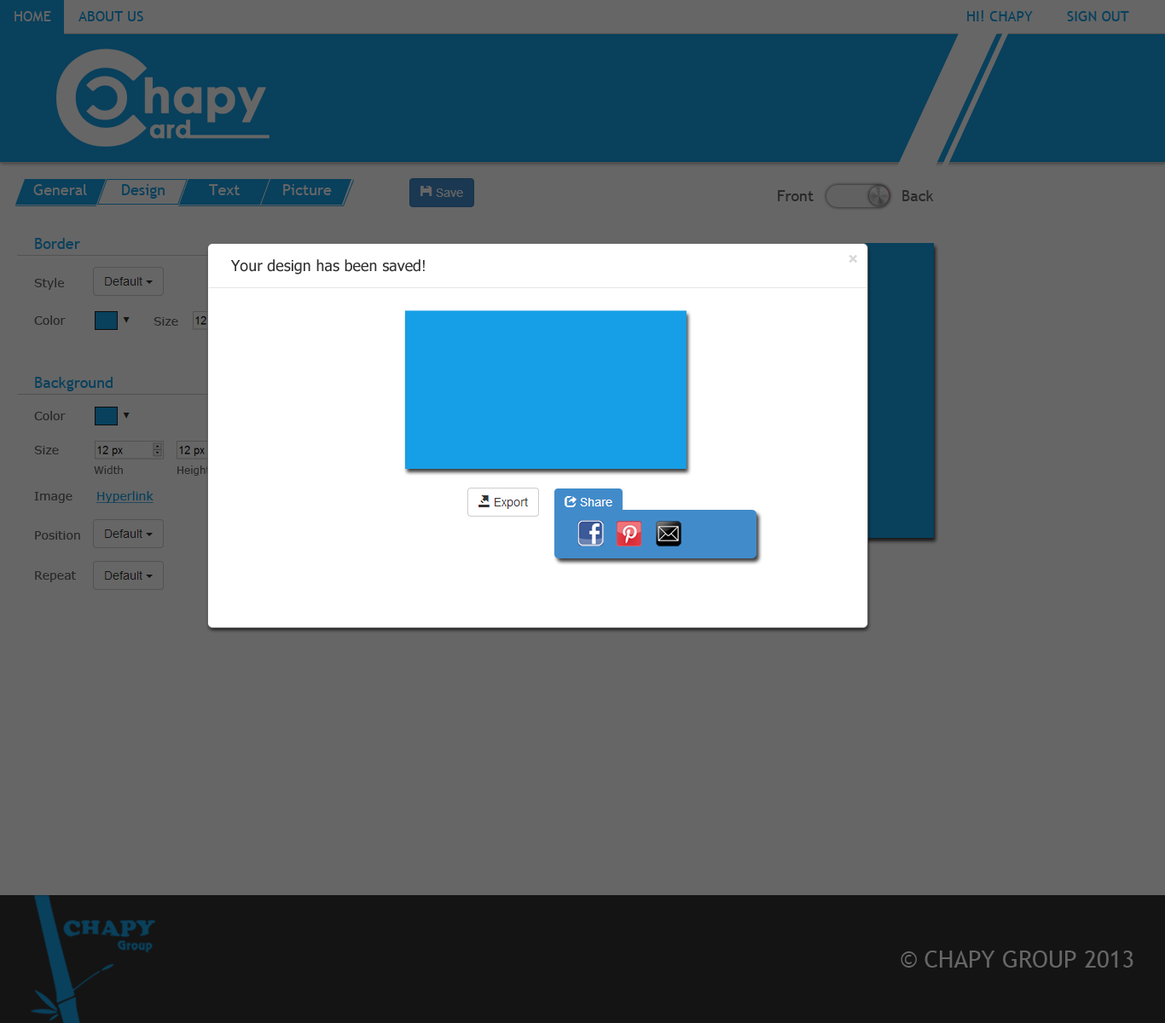
<style>
.page{position:relative;width:1165px;height:1023px;background:#666666}
.page>*{position:absolute;margin:0}
.t1{font:14.5px "TrebuchetMS";color:#666666;text-transform:uppercase}
.t2{font:14.5px "TrebuchetMS";color:#09405c;text-transform:uppercase}
.t3{font:15.4px "TrebuchetMS";color:#666666}
.t4{font:15.4px "TrebuchetMS";color:#09405c}
.t5{font:15.4px "TrebuchetMS";color:#292929}
.t6{font:15.4px "Tahoma";color:#333333}
.t7{font:11.9px "Verdana";color:#292929}
.t8{font:10.2px "Verdana";color:#292929}
.t9{font:11.9px "Verdana";color:#09405c;text-decoration:underline}
.t10{font:23.9px "TrebuchetMS";color:#666666;text-transform:uppercase}
</style>
<div class="page">
<p class="t1" style="left:14px;top:11px;width:37px;height:10px">Home</p>
<p class="t2" style="left:78px;top:11px;width:65px;height:10px">About us</p>
<p class="t2" style="left:967px;top:10px;width:66px;height:11px">Hi! Chapy</p>
<p class="t2" style="left:1067px;top:11px;width:62px;height:10px">Sign out</p>
<p class="t3" style="left:33px;top:184px;width:54px;height:11px">General</p>
<p class="t4" style="left:122px;top:184px;width:43px;height:15px">Design</p>
<p class="t3" style="left:209px;top:184px;width:31px;height:11px">Text</p>
<p class="t3" style="left:283px;top:184px;width:49px;height:11px">Picture</p>
<p class="t5" style="left:778px;top:190px;width:36px;height:11px">Front</p>
<p class="t5" style="left:902px;top:190px;width:32px;height:11px">Back</p>
<p class="t4" style="left:35px;top:238px;width:45px;height:11px">Border</p>
<p class="t6" style="left:230px;top:259px;width:195px;height:16px">Your design has been saved!</p>
<p class="t7" style="left:34px;top:278px;width:30px;height:12px">Style</p>
<p class="t7" style="left:34px;top:316px;width:32px;height:9px">Color</p>
<p class="t7" style="left:154px;top:317px;width:24px;height:9px">Size</p>
<p class="t4" style="left:35px;top:377px;width:78px;height:14px">Background</p>
<p class="t7" style="left:34px;top:411px;width:32px;height:9px">Color</p>
<p class="t7" style="left:34px;top:446px;width:25px;height:9px">Size</p>
<p class="t8" style="left:94px;top:466px;width:29px;height:8px">Width</p>
<p class="t8" style="left:177px;top:466px;width:34px;height:10px">Height</p>
<p class="t7" style="left:34px;top:492px;width:38px;height:11px">Image</p>
<p class="t9" style="left:96px;top:491px;width:58px;height:12px">Hyperlink</p>
<p class="t7" style="left:35px;top:531px;width:45px;height:9px">Position</p>
<p class="t7" style="left:35px;top:571px;width:41px;height:12px">Repeat</p>
<p class="t10" style="left:901px;top:951px;width:233px;height:17px">© chapy group 2013</p>
</div>
